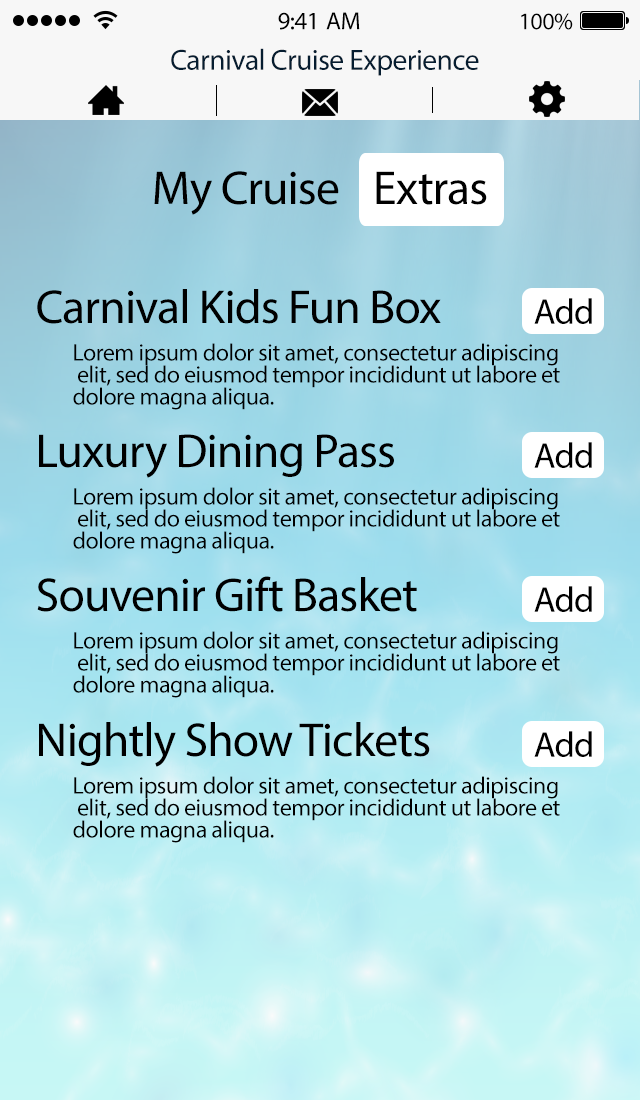
<style>
.page{position:relative;width:640px;height:1100px}
.page>*{position:absolute;margin:0}
.t1{font:25px "MyriadPro-Regular";letter-spacing:-0.02em;color:#000000}
.t2{font:24px "MyriadPro-Regular";letter-spacing:-0.02em;color:#000000}
.t3{font:29.4px "MyriadPro-Regular";letter-spacing:-0.02em;color:#061d30}
.t4{font:48px "MyriadPro-Regular";letter-spacing:-0.02em;color:#000000}
.t5{font:36px "MyriadPro-Regular";letter-spacing:-0.02em;color:#000000}
</style>
<div class="page">
<p class="t1" style="left:278px;top:12px;width:82px;height:18px">9:41 AM</p>
<p class="t2" style="left:521px;top:13px;width:52px;height:17px">100%</p>
<p class="t3" style="left:171px;top:48px;width:308px;height:28px">Carnival Cruise Experience</p>
<p class="t4" style="left:154px;top:171px;width:185px;height:44px">My Cruise</p>
<p class="t4" style="left:376px;top:171px;width:111px;height:34px">Extras</p>
<p class="t4" style="left:37px;top:289px;width:404px;height:35px">Carnival Kids Fun Box</p>
<p class="t5" style="left:534px;top:298px;width:58px;height:26px">Add</p>
<p class="t2" style="left:74px;top:343px;width:484px;height:23px">Lorem ipsum dolor sit amet, consectetur adipiscing</p>
<p class="t2" style="left:78px;top:365px;width:482px;height:23px">elit, sed do eiusmod tempor incididunt ut labore et</p>
<p class="t2" style="left:73px;top:387px;width:201px;height:23px">dolore magna aliqua.</p>
<p class="t4" style="left:39px;top:434px;width:355px;height:44px">Luxury Dining Pass</p>
<p class="t5" style="left:534px;top:442px;width:58px;height:26px">Add</p>
<p class="t2" style="left:74px;top:487px;width:484px;height:23px">Lorem ipsum dolor sit amet, consectetur adipiscing</p>
<p class="t2" style="left:78px;top:509px;width:482px;height:23px">elit, sed do eiusmod tempor incididunt ut labore et</p>
<p class="t2" style="left:73px;top:531px;width:201px;height:23px">dolore magna aliqua.</p>
<p class="t4" style="left:37px;top:576px;width:380px;height:36px">Souvenir Gift Basket</p>
<p class="t5" style="left:534px;top:586px;width:58px;height:26px">Add</p>
<p class="t2" style="left:74px;top:631px;width:484px;height:23px">Lorem ipsum dolor sit amet, consectetur adipiscing</p>
<p class="t2" style="left:78px;top:653px;width:482px;height:23px">elit, sed do eiusmod tempor incididunt ut labore et</p>
<p class="t2" style="left:73px;top:675px;width:201px;height:23px">dolore magna aliqua.</p>
<p class="t4" style="left:39px;top:722px;width:391px;height:45px">Nightly Show Tickets</p>
<p class="t5" style="left:534px;top:731px;width:58px;height:26px">Add</p>
<p class="t2" style="left:74px;top:776px;width:484px;height:23px">Lorem ipsum dolor sit amet, consectetur adipiscing</p>
<p class="t2" style="left:78px;top:798px;width:482px;height:23px">elit, sed do eiusmod tempor incididunt ut labore et</p>
<p class="t2" style="left:73px;top:820px;width:201px;height:23px">dolore magna aliqua.</p>
</div>
